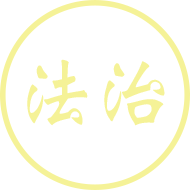
<style>
.page{position:relative;width:190px;height:190px;background:#ffffff}
.page>*{position:absolute;margin:0}
.t1{font:83.3px "Weibei-TC-Bold";color:#f5f297;scale:0.94 1}
</style>
<div class="page">
<p class="t1" style="left:27px;top:59px;width:138px;height:67px">法治</p>
</div>
